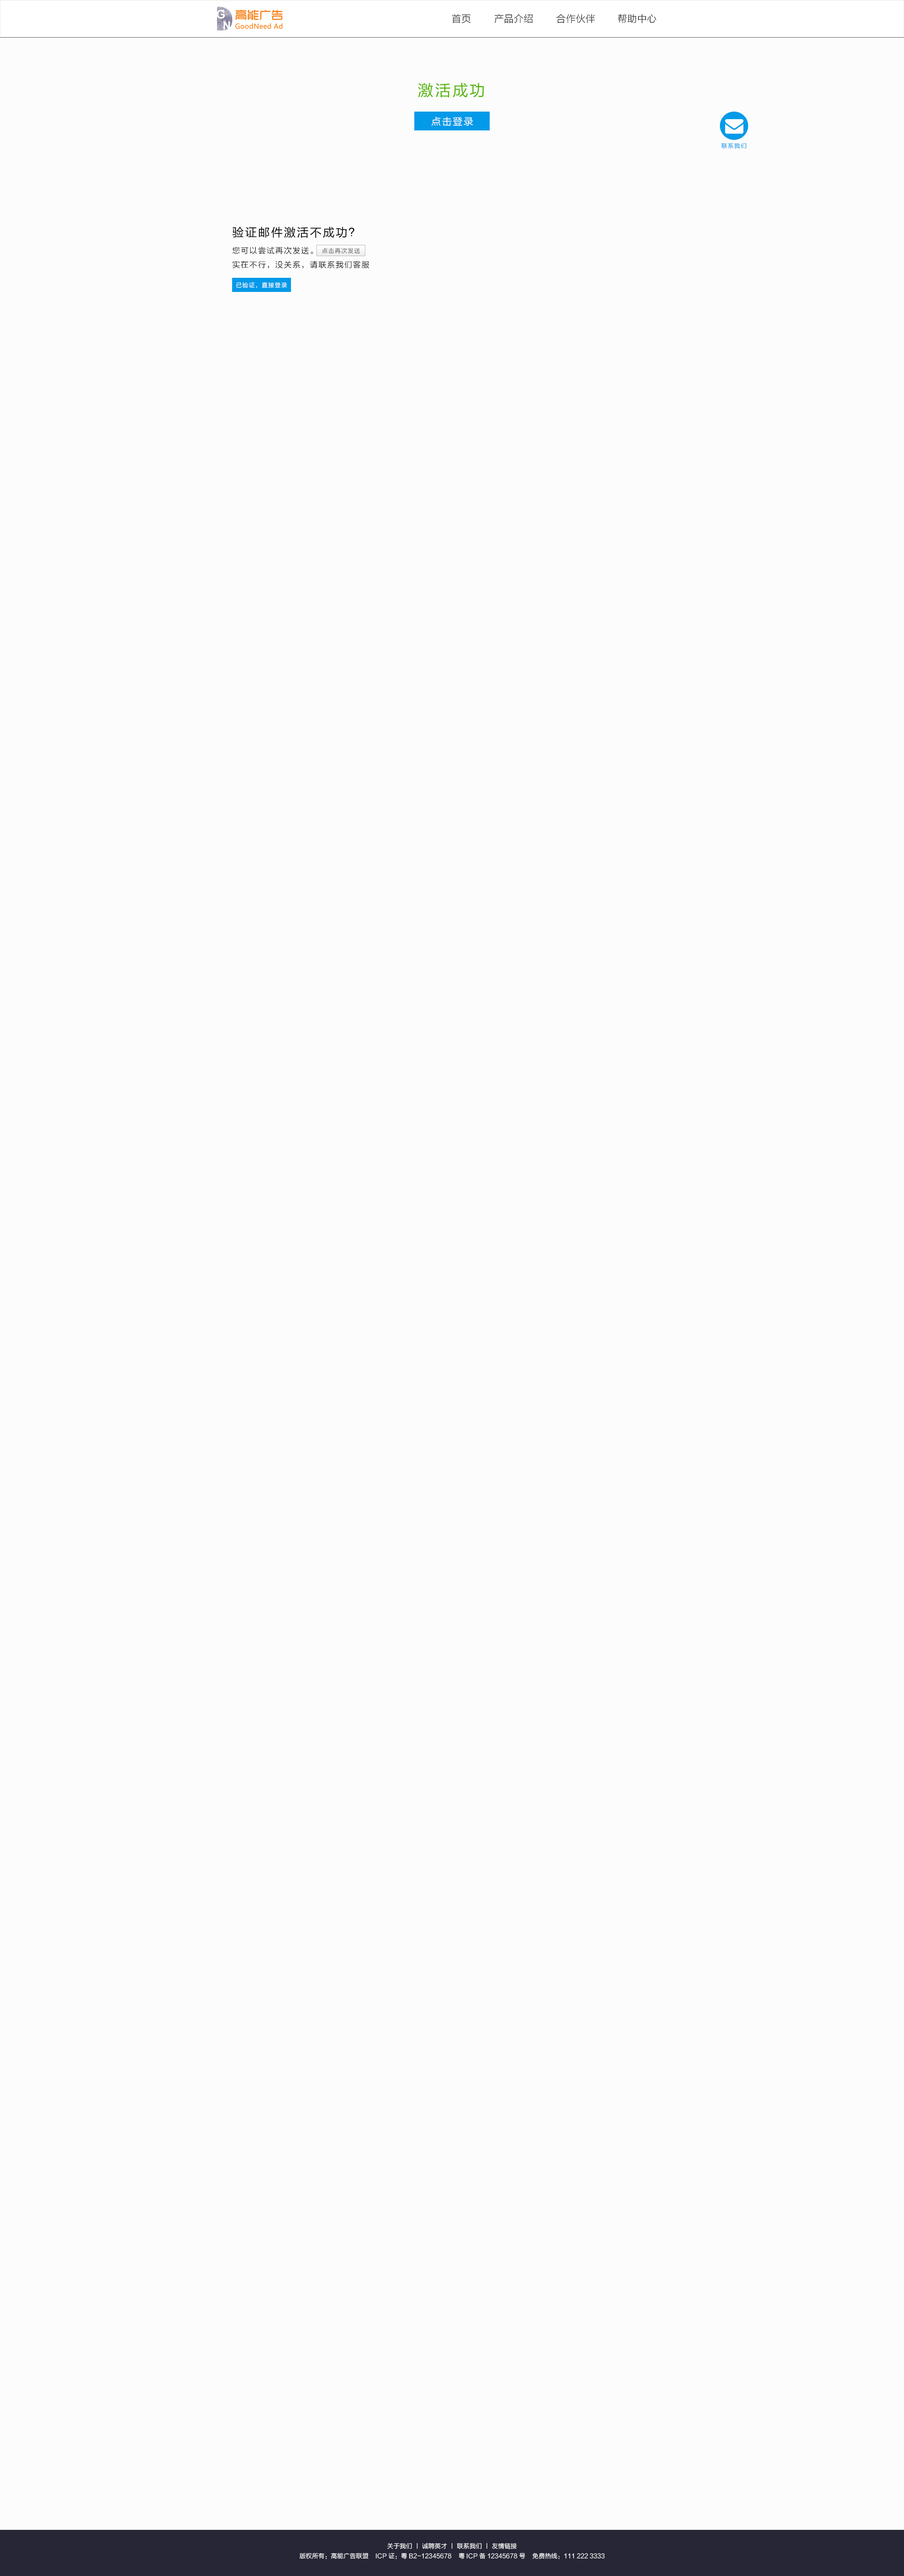
<style>
.page{position:relative;width:904px;height:2576px;background:#fcfcfc}
.page>*{position:absolute;margin:0}
.t1{font:9.8px "FZLTXHK";color:#333333}
.t2{font:15.7px "FZLTHK--GBK1-0";letter-spacing:0.1em;color:#54b506}
.t3{font:9.8px "FZLTHK--GBK1-0";letter-spacing:0.1em;color:#ffffff}
.t4{font:5.9px "FZLTXHK";letter-spacing:0.1em;color:#039ae9}
.t5{font:7.8px "FZLTXHK";letter-spacing:0.1em;color:#000000}
.t6{font:11.8px "FZLTHK--GBK1-0";letter-spacing:0.1em;color:#000000}
.t7{font:5.9px "FZLTXHK";letter-spacing:0.1em;color:#666666}
.t8{font:5.9px "FZLTXHK";letter-spacing:0.1em;color:#ffffff}
.t9{font:6.3px "FZLTXHK";color:#ffffff}
</style>
<div class="page">
<p class="t1" style="left:452px;top:14px;width:19px;height:10px">首页</p>
<p class="t1" style="left:494px;top:14px;width:39px;height:10px">产品介绍</p>
<p class="t1" style="left:556px;top:14px;width:39px;height:10px">合作伙伴</p>
<p class="t1" style="left:618px;top:14px;width:38px;height:10px">帮助中心</p>
<p class="t2" style="left:418px;top:82px;width:66px;height:15px">激活成功</p>
<p class="t3" style="left:431px;top:117px;width:42px;height:9px">点击登录</p>
<p class="t4" style="left:721px;top:143px;width:25px;height:6px">联系我们</p>
<p class="t5" style="left:232px;top:226px;width:138px;height:43px"><span class="t6">验证邮件激活不成功？</span><br>您可以尝试再次发送。<br>实在不行，没关系，请联系我们客服</p>
<p class="t7" style="left:322px;top:248px;width:38px;height:6px">点击再次发送</p>
<p class="t8" style="left:236px;top:282px;width:51px;height:6px">已验证，直接登录</p>
<p class="t9" style="left:387px;top:2543px;width:130px;height:6px">关于我们 丨 诚聘英才 丨 联系我们 丨 友情链接</p>
<p class="t9" style="left:299px;top:2552px;width:306px;height:7px">版权所有：高能广告联盟    ICP证：粤B2-12345678    粤ICP备12345678号    免费热线：111 222 3333</p>
</div>
